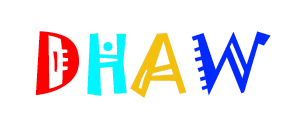
<style>
.page{position:relative;width:300px;height:128px;background:#ffffff}
.page>*{position:absolute;margin:0}
.t1{font:72px "Jokerman-Regular"}
.t2{font:72px "Jokerman-Regular";color:#ff0000}
.t3{font:72px "Jokerman-Regular";color:#00f6ff}
.t4{font:72px "Jokerman-Regular";color:#f3c00e}
.t5{font:72px "Jokerman-Regular";color:#002aff}
</style>
<div class="page">
<p class="t1" style="left:35px;top:31px;width:236px;height:67px">DHAW</p>
<p class="t2" style="left:35px;top:31px;width:236px;height:67px">D<span class="t3">H</span><span class="t4">A</span><span class="t5">W</span></p>
</div>
